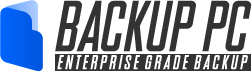
<style>
.page{position:relative;width:252px;height:72px;background:#ffffff}
.page>*{position:absolute;margin:0}
.t1{font:72px "SNES-Italic";color:#333333}
.t2{font:20px "SNES-Italic";color:#ffffff}
</style>
<div class="page">
<p class="t1" style="left:55px;top:0px;width:197px;height:52px">BACKUP PC</p>
<p class="t2" style="left:57px;top:55px;width:191px;height:15px">E N T E R P R I S E-G R A D E-B A C K U P</p>
</div>
